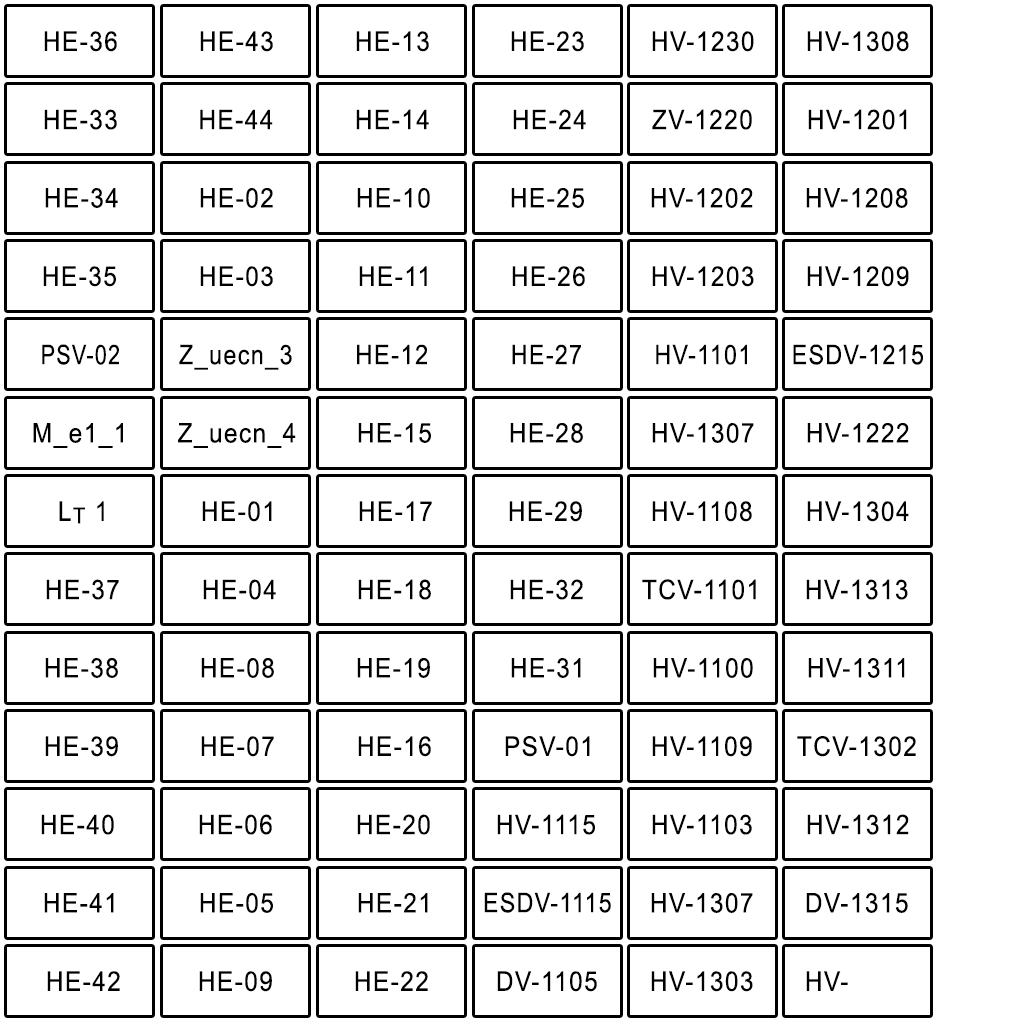
<style>
.page{position:relative;width:1024px;height:1024px;background:#ffffff}
.page>*{position:absolute;margin:0}
.t1{font:46.3px "ArialMT";letter-spacing:0.06em;color:#000000;scale:0.9 1}
.t2{font:46.4px "ArialMT";letter-spacing:0.06em;color:#000000;scale:0.79 1}
.t3{font:46.4px "ArialMT";letter-spacing:0.06em;color:#000000;scale:0.86 1}
.t4{font:46.4px "ArialMT";letter-spacing:0.06em;color:#000000;scale:0.88 1}
.t5{font:38.2px "ArialMT";letter-spacing:0.06em;color:#000000;scale:0.9 1}
</style>
<div class="page">
<p class="t1" style="left:44px;top:31px;width:73px;height:21px">HE-36</p>
<p class="t1" style="left:200px;top:31px;width:73px;height:21px">HE-43</p>
<p class="t1" style="left:356px;top:31px;width:73px;height:21px">HE-13</p>
<p class="t1" style="left:511px;top:31px;width:73px;height:21px">HE-23</p>
<p class="t1" style="left:652px;top:31px;width:102px;height:21px">HV-1230</p>
<p class="t1" style="left:807px;top:31px;width:102px;height:21px">HV-1308</p>
<p class="t1" style="left:44px;top:109px;width:73px;height:21px">HE-33</p>
<p class="t1" style="left:200px;top:109px;width:73px;height:21px">HE-44</p>
<p class="t1" style="left:356px;top:109px;width:73px;height:21px">HE-14</p>
<p class="t1" style="left:513px;top:109px;width:73px;height:21px">HE-24</p>
<p class="t1" style="left:652px;top:109px;width:100px;height:21px">ZV-1220</p>
<p class="t1" style="left:808px;top:109px;width:99px;height:21px">HV-1201</p>
<p class="t1" style="left:45px;top:188px;width:73px;height:20px">HE-34</p>
<p class="t1" style="left:200px;top:188px;width:73px;height:20px">HE-02</p>
<p class="t1" style="left:357px;top:188px;width:73px;height:20px">HE-10</p>
<p class="t1" style="left:511px;top:188px;width:73px;height:20px">HE-25</p>
<p class="t1" style="left:651px;top:188px;width:102px;height:20px">HV-1202</p>
<p class="t1" style="left:806px;top:188px;width:102px;height:20px">HV-1208</p>
<p class="t1" style="left:43px;top:266px;width:73px;height:21px">HE-35</p>
<p class="t1" style="left:200px;top:266px;width:73px;height:21px">HE-03</p>
<p class="t1" style="left:359px;top:266px;width:68px;height:20px">HE-11</p>
<p class="t1" style="left:512px;top:266px;width:73px;height:21px">HE-26</p>
<p class="t1" style="left:652px;top:266px;width:102px;height:21px">HV-1203</p>
<p class="t1" style="left:807px;top:266px;width:102px;height:21px">HV-1209</p>
<p class="t2" style="left:42px;top:344px;width:77px;height:21px">PSV-02</p>
<p class="t3" style="left:179px;top:344px;width:113px;height:26px">Z_uecn_3</p>
<p class="t4" style="left:357px;top:344px;width:70px;height:21px">HE-12</p>
<p class="t3" style="left:512px;top:344px;width:69px;height:21px">HE-27</p>
<p class="t3" style="left:656px;top:344px;width:91px;height:21px">HV-1101</p>
<p class="t3" style="left:793px;top:344px;width:130px;height:21px">ESDV-1215</p>
<p class="t1" style="left:33px;top:423px;width:90px;height:25px">M_e1_1</p>
<p class="t1" style="left:178px;top:423px;width:118px;height:25px">Z_uecn_4</p>
<p class="t1" style="left:358px;top:423px;width:73px;height:20px">HE-15</p>
<p class="t1" style="left:510px;top:423px;width:73px;height:20px">HE-28</p>
<p class="t1" style="left:652px;top:423px;width:102px;height:20px">HV-1307</p>
<p class="t1" style="left:807px;top:423px;width:102px;height:20px">HV-1222</p>
<p class="t1" style="left:59px;top:501px;width:45px;height:23px">L<span class="t5">T</span> 1</p>
<p class="t1" style="left:202px;top:501px;width:70px;height:21px">HE-01</p>
<p class="t1" style="left:359px;top:501px;width:73px;height:20px">HE-17</p>
<p class="t1" style="left:509px;top:501px;width:73px;height:21px">HE-29</p>
<p class="t1" style="left:652px;top:501px;width:100px;height:21px">HV-1108</p>
<p class="t1" style="left:807px;top:501px;width:102px;height:21px">HV-1304</p>
<p class="t1" style="left:46px;top:579px;width:73px;height:21px">HE-37</p>
<p class="t1" style="left:203px;top:579px;width:73px;height:21px">HE-04</p>
<p class="t1" style="left:358px;top:579px;width:73px;height:21px">HE-18</p>
<p class="t1" style="left:510px;top:579px;width:73px;height:21px">HE-32</p>
<p class="t1" style="left:642px;top:579px;width:114px;height:21px">TCV-1101</p>
<p class="t1" style="left:806px;top:579px;width:102px;height:21px">HV-1313</p>
<p class="t1" style="left:45px;top:658px;width:73px;height:20px">HE-38</p>
<p class="t1" style="left:201px;top:658px;width:73px;height:20px">HE-08</p>
<p class="t1" style="left:357px;top:658px;width:73px;height:20px">HE-19</p>
<p class="t1" style="left:511px;top:658px;width:70px;height:20px">HE-31</p>
<p class="t1" style="left:653px;top:658px;width:100px;height:20px">HV-1100</p>
<p class="t1" style="left:808px;top:658px;width:97px;height:20px">HV-1311</p>
<p class="t1" style="left:45px;top:736px;width:73px;height:21px">HE-39</p>
<p class="t1" style="left:201px;top:736px;width:73px;height:21px">HE-07</p>
<p class="t1" style="left:358px;top:736px;width:73px;height:21px">HE-16</p>
<p class="t1" style="left:505px;top:736px;width:85px;height:21px">PSV-01</p>
<p class="t1" style="left:652px;top:736px;width:100px;height:21px">HV-1109</p>
<p class="t1" style="left:797px;top:736px;width:119px;height:21px">TCV-1302</p>
<p class="t1" style="left:41px;top:814px;width:73px;height:21px">HE-40</p>
<p class="t1" style="left:199px;top:814px;width:73px;height:21px">HE-06</p>
<p class="t1" style="left:357px;top:814px;width:73px;height:21px">HE-20</p>
<p class="t1" style="left:497px;top:814px;width:98px;height:21px">HV-1115</p>
<p class="t1" style="left:652px;top:814px;width:100px;height:21px">HV-1103</p>
<p class="t1" style="left:807px;top:814px;width:102px;height:21px">HV-1312</p>
<p class="t1" style="left:44px;top:893px;width:70px;height:20px">HE-41</p>
<p class="t1" style="left:200px;top:893px;width:73px;height:20px">HE-05</p>
<p class="t1" style="left:358px;top:893px;width:70px;height:20px">HE-21</p>
<p class="t3" style="left:484px;top:892px;width:127px;height:21px">ESDV-1115</p>
<p class="t1" style="left:651px;top:893px;width:102px;height:20px">HV-1307</p>
<p class="t1" style="left:806px;top:893px;width:102px;height:20px">DV-1315</p>
<p class="t1" style="left:47px;top:971px;width:73px;height:20px">HE-42</p>
<p class="t1" style="left:199px;top:971px;width:73px;height:21px">HE-09</p>
<p class="t1" style="left:355px;top:971px;width:73px;height:20px">HE-22</p>
<p class="t1" style="left:497px;top:971px;width:100px;height:21px">DV-1105</p>
<p class="t1" style="left:651px;top:971px;width:102px;height:21px">HV-1303</p>
<p class="t1" style="left:806px;top:971px;width:42px;height:20px">HV-</p>
</div>
